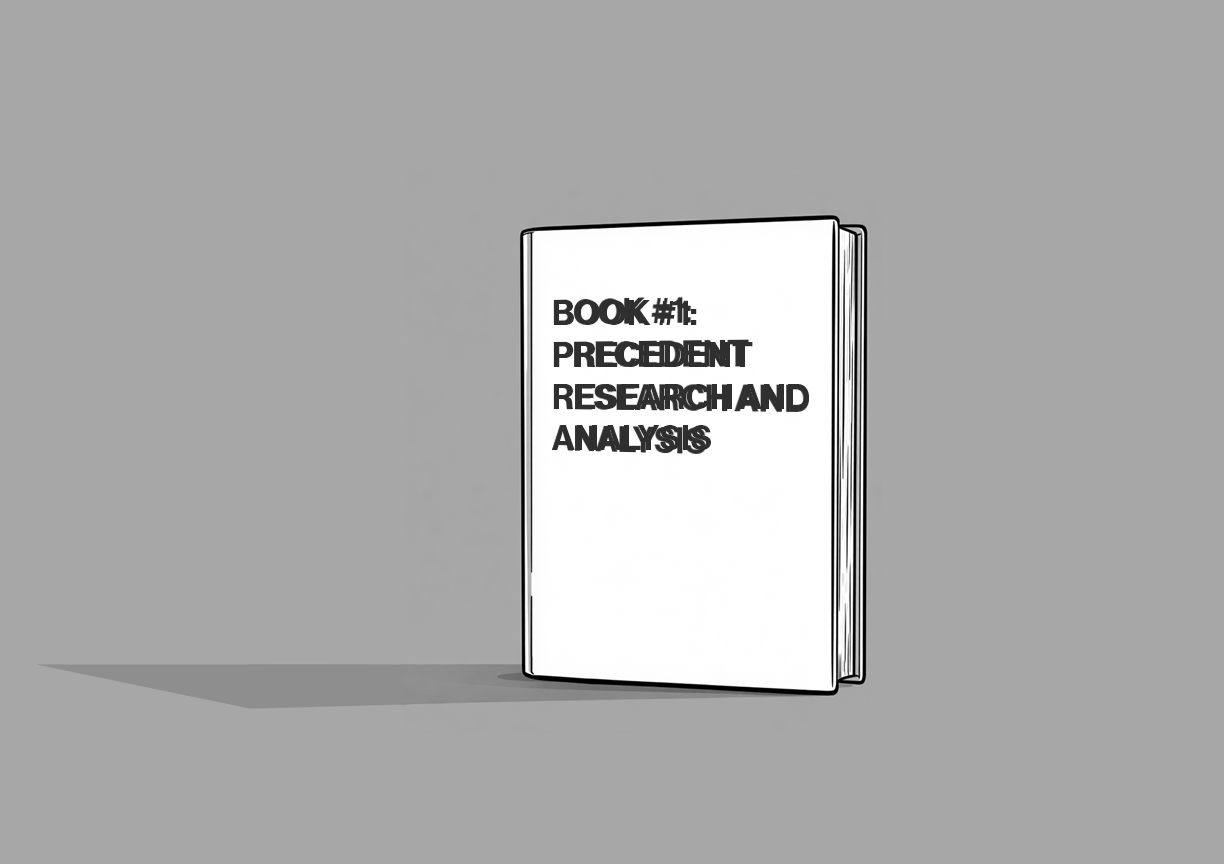
<style>
.page{position:relative;width:1224px;height:864px;background:#a7a7a7}
.page>*{position:absolute;margin:0}
.t1{font:34.8px "NHaasGroteskDSPro-65Md";color:#2f2f2f}
</style>
<div class="page">
<p class="t1" style="left:552px;top:300px;width:257px;height:150px">BOOK #1: PRECEDENT RESEARCH AND ANALYSIS ANALYSIS</p>
</div>
